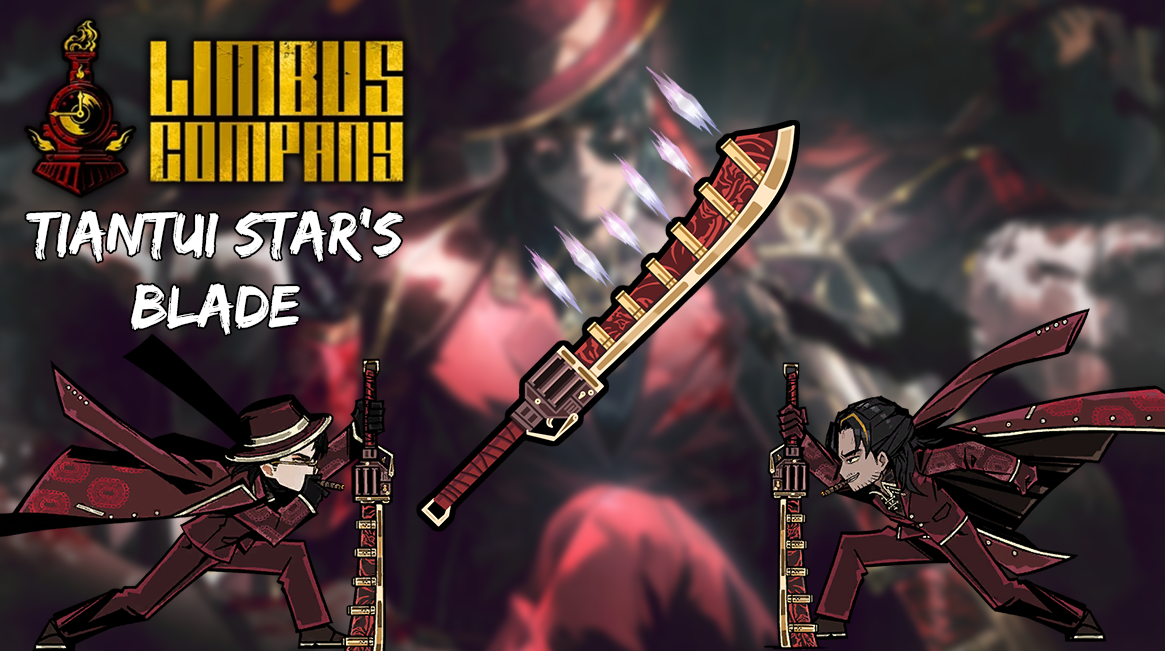
<style>
.page{position:relative;width:1165px;height:651px}
.page>*{position:absolute;margin:0}
.t1{font:61.2px "EdoSZ";color:#ffffff}
</style>
<div class="page">
<p class="t1" style="left:26px;top:207px;width:378px;height:128px;text-align:center">TIANTUI STAR’S<br>BLADE</p>
</div>
